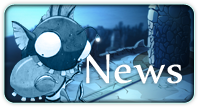
<style>
.page{position:relative;width:200px;height:109px}
.page>*{position:absolute;margin:0}
.t1{font:50px "Nyala-Regular";letter-spacing:0.025em;color:#ffffff}
</style>
<div class="page">
<p class="t1" style="left:84px;top:53px;width:98px;height:31px">News</p>
</div>
